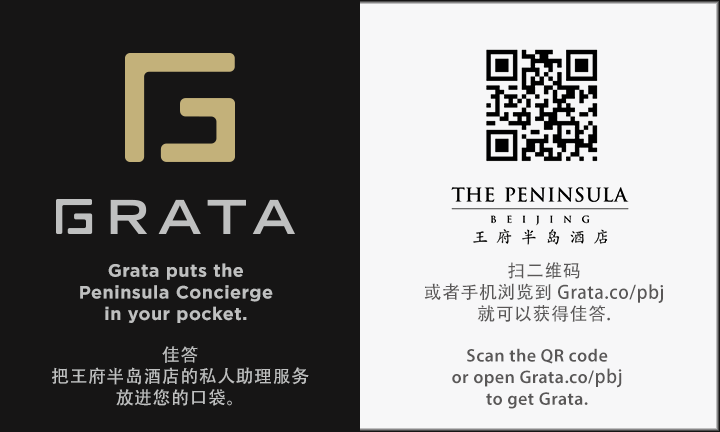
<style>
.page{position:relative;width:720px;height:432px;background:#161515}
.page>*{position:absolute;margin:0}
.t1{font:18px "Gotham-Bold";letter-spacing:0.025em;color:#bfc0c0}
.t2{font:18px "AdobeHeitiStd-Regular";letter-spacing:0.025em;color:#595757}
.t3{font:18px "AdobeHeitiStd-Regular";letter-spacing:0.025em;color:#bfc0c0}
.t4{font:18px "AdobeHeitiStd-Regular";letter-spacing:0.025em;color:#bfc0c0;font-variant:small-caps}
.t5{font:18px "MyriadPro-Semibold";letter-spacing:0.025em;color:#595757}
</style>
<div class="page">
<p class="t1" style="left:80px;top:263px;width:193px;height:60px;text-align:center">Grata puts the <br>Peninsula Concierge<br>in your pocket. <br>Whatever you need, just ask.</p>
<p class="t2" style="left:424px;top:262px;width:239px;height:60px;text-align:center">扫二维码<br>或者手机浏览到 Grata.co/pbj<br>就可以获得佳答.</p>
<p class="t3" style="left:52px;top:346px;width:257px;height:60px;text-align:center">佳答<br>把王府半岛酒店的私人助理服务<br><span class="t4">放进您的口袋。</span></p>
<p class="t5" style="left:452px;top:348px;width:170px;height:61px;text-align:center">Scan the QR code <br>or open Grata.co/<span class="t2">pbj<br></span>to get Grata.</p>
</div>
